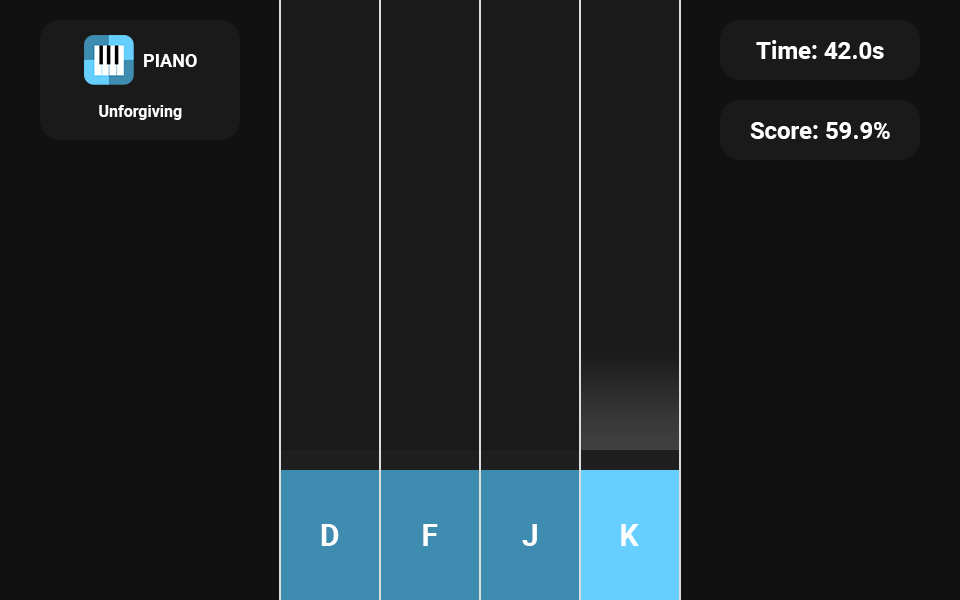
<style>
.page{position:relative;width:960px;height:600px;background:#111111}
.page>*{position:absolute;margin:0}
.t1{font:24px "Roboto-Bold";color:#ffffff}
.t2{font:18px "Roboto-Bold";color:#ffffff}
.t3{font:16px "Roboto-Bold";color:#ffffff}
.t4{font:30px "Roboto-Bold";color:#ffffff}
</style>
<div class="page">
<p class="t1" style="left:756px;top:40px;width:128px;height:19px">Time: 42.0s</p>
<p class="t2" style="left:144px;top:54px;width:53px;height:13px">PIANO</p>
<p class="t3" style="left:99px;top:105px;width:83px;height:15px">Unforgiving</p>
<p class="t1" style="left:750px;top:122px;width:140px;height:17px">Score: 59.9%</p>
<p class="t4" style="left:321px;top:524px;width:18px;height:22px">D</p>
<p class="t4" style="left:423px;top:524px;width:15px;height:22px">F</p>
<p class="t4" style="left:522px;top:524px;width:15px;height:22px">J</p>
<p class="t4" style="left:621px;top:524px;width:18px;height:22px">K</p>
</div>
